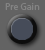
<style>
.page{position:relative;width:45px;height:50px;background:#636363}
.page>*{position:absolute;margin:0}
.t1{font:10px "MyriadPro-Regular";color:#838383}
</style>
<div class="page">
<p class="t1" style="left:5px;top:3px;width:35px;height:7px">Pre Gain</p>
</div>
